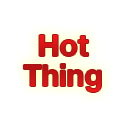
<style>
.page{position:relative;width:128px;height:128px;background:#ffffff}
.page>*{position:absolute;margin:0}
.t1{font:30px/30px "HelveticaNeue-Bold";letter-spacing:-0.005em;color:#cd1515}
</style>
<div class="page">
<p class="t1" style="left:23px;top:35px;width:78px;height:57px;text-align:center">Hot<br>Thing</p>
</div>
